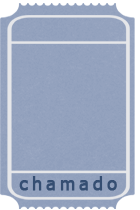
<style>
.page{position:relative;width:140px;height:210px}
.page>*{position:absolute;margin:0}
.t1{font:18.2px "Tahoma";letter-spacing:0.2em;color:#354e72;font-weight:bold}
</style>
<div class="page">
<p class="t1" style="left:19px;top:176px;width:98px;height:15px">chamado</p>
</div>
